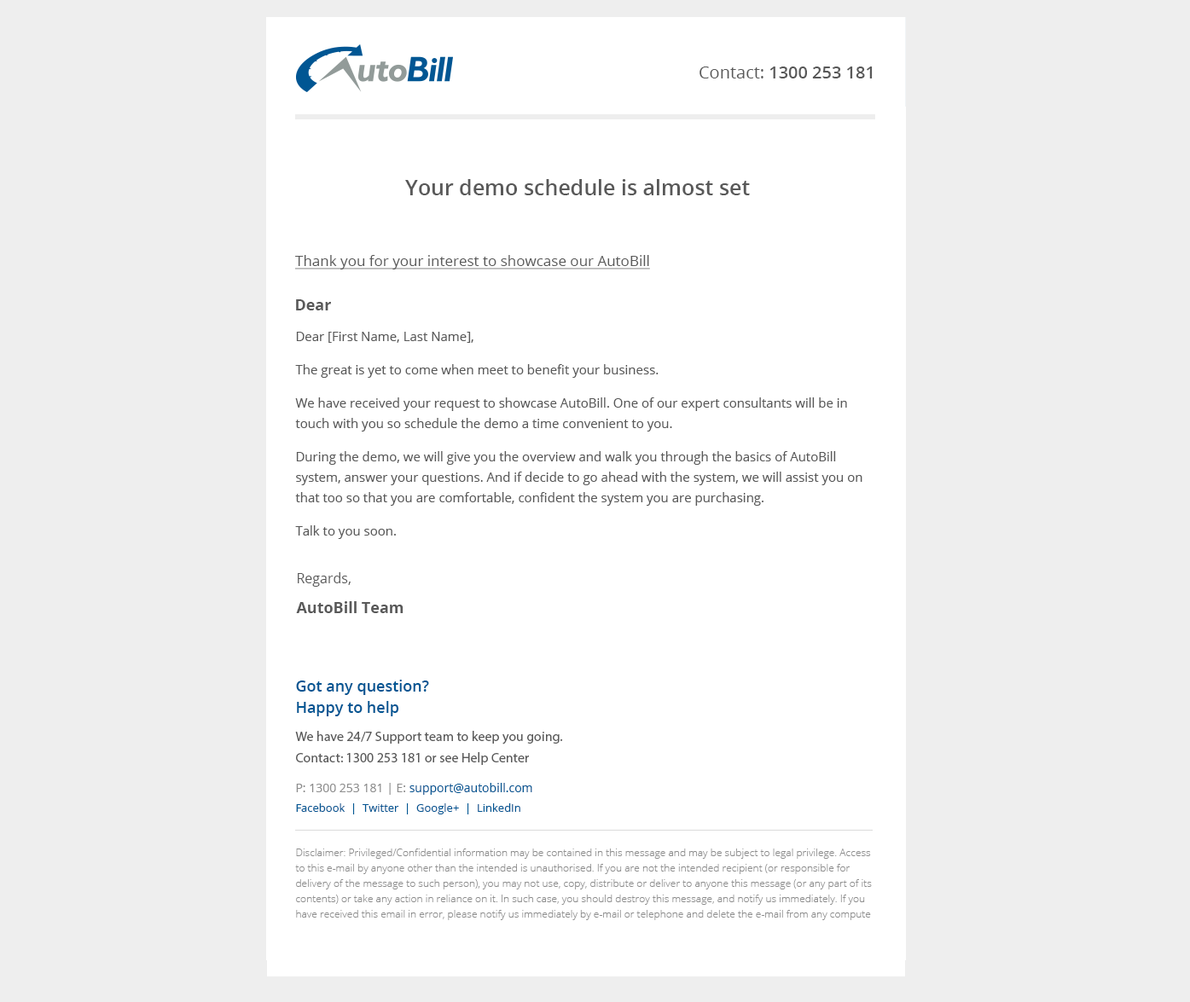
<style>
.page{position:relative;width:1190px;height:1002px;background:#eeeeee}
.page>*{position:absolute;margin:0}
.t1{font:17.1px "OpenSans-Semibold";color:#595959}
.t2{font:17.1px "OpenSans";color:#595959}
.t3{font:21.3px "OpenSans-Semibold";color:#595959}
.t4{font:14.5px "OpenSans";color:#595959;text-decoration:underline}
.t5{font:15.4px "OpenSans-Bold";color:#595959}
.t6{font:12.8px/20.5px "OpenSans";color:#595959}
.t7{font:15.4px/17.1px "OpenSans-Bold";color:#595959}
.t8{font:13.6px/17.1px "OpenSans";color:#595959}
.t9{font:13.6px/15.4px "MyriadPro-Regular";color:#595959}
.t10{font:15.4px/8.5px "OpenSans-Semibold";color:#005693}
.t11{font:13.6px/8.5px "MyriadPro-Regular";color:#595959}
.t12{font:11.1px/6.8px "OpenSans";color:#005693}
.t13{font:11.9px/6.8px "OpenSans";color:#8d8d8d}
.t14{font:11.9px/6.8px "OpenSans";color:#005693}
.t15{font:10.2px/15.4px "OpenSans-Light";color:#8d8d8d}
</style>
<div class="page">
<p class="t1" style="left:699px;top:67px;width:174px;height:11px"><span class="t2">Contact:</span> 1300 253 181</p>
<p class="t3" style="left:405px;top:179px;width:345px;height:16px">Your demo schedule is almost set</p>
<p class="t4" style="left:295px;top:255px;width:355px;height:15px">Thank you for your interest to showcase our AutoBill</p>
<p class="t5" style="left:296px;top:299px;width:35px;height:11px">Dear</p>
<p class="t6" style="left:295px;top:332px;width:567px;height:207px">Dear [First Name, Last Name],<br>The great is yet to come when meet to benefit your business. <br>We have received your request to showcase AutoBill. One of our expert consultants will be in touch with you so schedule the demo a time convenient to you.<br>During the demo, we will give you the overview and walk you through the basics of AutoBill system, answer your questions. And if decide to go ahead with the system, we will assist you on that too so that you are comfortable, confident the system you are purchasing.<br>Talk to you soon.</p>
<p class="t7" style="left:296px;top:572px;width:107px;height:41px"><span class="t8">Regards,<br></span>AutoBill Team</p>
<p class="t9" style="left:295px;top:680px;width:268px;height:85px"><span class="t10">Got any question?<br>Happy to help<br></span>We have 24/7 Support team to keep you going.<br><span class="t11">Contact: 1300 253 181 or see Help Center</span></p>
<p class="t12" style="left:296px;top:783px;width:236px;height:32px"><span class="t13">P: 1300 253 181 | E: </span><span class="t14">support@autobill.com <br></span>Facebook  |  Twitter  |  Google+  |  LinkedIn</p>
<p class="t15" style="left:295px;top:849px;width:577px;height:71px">Disclaimer: Privileged/Confidential information may be contained in this message and may be subject to legal privilege. Access to this e-mail by anyone other than the intended is unauthorised. If you are not the intended recipient (or responsible for delivery of the message to such person), you may not use, copy, distribute or deliver to anyone this message (or any part of its contents) or take any action in reliance on it. In such case, you should destroy this message, and notify us immediately. If you have received this email in error, please notify us immediately by e-mail or telephone and delete the e-mail from any compute</p>
</div>
